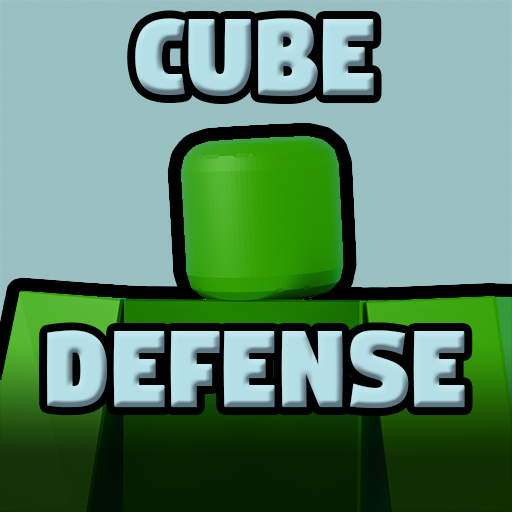
<style>
.page{position:relative;width:512px;height:512px}
.page>*{position:absolute;margin:0}
.t1{font:130px "Digitalt";color:#b5dfe6}
</style>
<div class="page">
<p class="t1" style="left:47px;top:18px;width:418px;height:390px;text-align:center">CUBE<br><br>DEFENSE</p>
</div>
